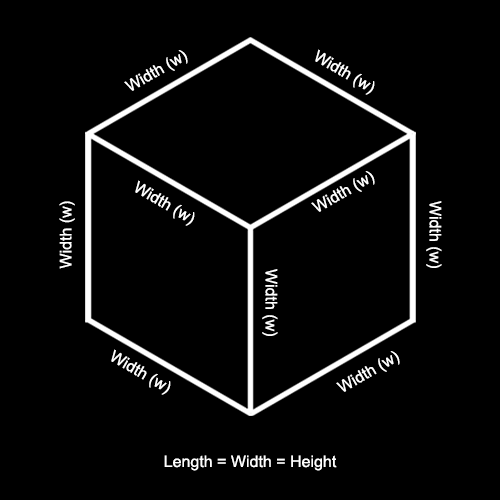
<style>
.page{position:relative;width:500px;height:500px;background:#000000}
.page>*{position:absolute;margin:0}
.t1{font:16px "ArialMT";color:#ffffff}
</style>
<div class="page">
<p class="t1" style="left:124px;top:50px;width:64px;height:41px;rotate:-30deg">Width (w)</p>
<p class="t1" style="left:315px;top:49px;width:60px;height:46px;rotate:30deg">Width (w)</p>
<p class="t1" style="left:311px;top:171px;width:64px;height:41px;rotate:-30deg">Width (w)</p>
<p class="t1" style="left:135px;top:180px;width:60px;height:46px;rotate:30deg">Width (w)</p>
<p class="t1" style="left:59px;top:201px;width:16px;height:68px;rotate:-90deg">Width (w)</p>
<p class="t1" style="left:426px;top:201px;width:16px;height:67px;rotate:90deg">Width (w)</p>
<p class="t1" style="left:262px;top:269px;width:16px;height:67px;rotate:90deg">Width (w)</p>
<p class="t1" style="left:111px;top:349px;width:60px;height:46px;rotate:30deg">Width (w)</p>
<p class="t1" style="left:336px;top:351px;width:64px;height:41px;rotate:-30deg">Width (w)</p>
<p class="t1" style="left:164px;top:455px;width:173px;height:16px">Length = Width = Height</p>
</div>
